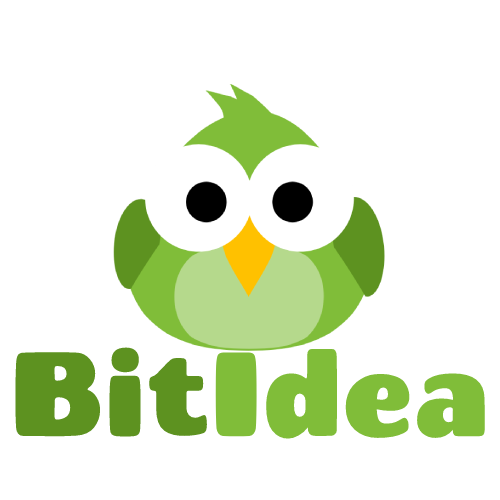
<style>
.page{position:relative;width:500px;height:500px;background:#ffffff}
.page>*{position:absolute;margin:0}
.t1{font:119.2px "Chango-Regular";color:#80bd39;scale:0.81 1}
.t2{font:119.2px "Chango-Regular";color:#5d9220;scale:0.81 1}
</style>
<div class="page">
<p class="t1" style="left:15px;top:347px;width:470px;height:92px"><span class="t2">Bit</span>Idea</p>
</div>
